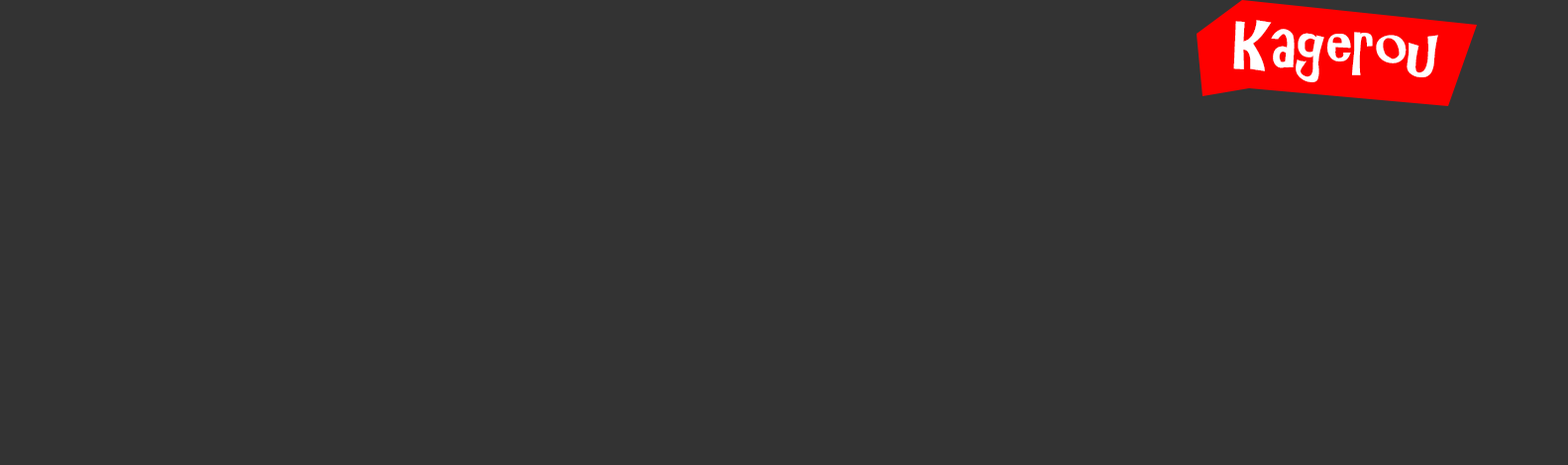
<style>
.page{position:relative;width:1568px;height:465px;background:#333333}
.page>*{position:absolute;margin:0}
.t1{font:60.6px "ARCHRISTY";color:#ffffff}
</style>
<div class="page">
<p class="t1" style="left:1233px;top:20px;width:205px;height:62px;rotate:3deg">Kagerou</p>
</div>
